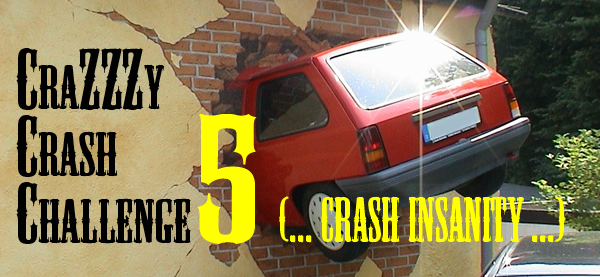
<style>
.page{position:relative;width:600px;height:277px}
.page>*{position:absolute;margin:0}
.t1{font:80px "MesquiteStd";color:#010101;scale:1.25 1}
.t2{font:57.6px "MesquiteStd";color:#010101;scale:1.25 1}
.t3{font:169.2px "MesquiteStd";color:#ffff00;scale:1.72 1}
.t4{font:60px "MesquiteStd";color:#ffff00}
</style>
<div class="page">
<p class="t1" style="left:16px;top:48px;width:149px;height:62px">C<span class="t2">RA</span>ZZZ<span class="t2">Y</span></p>
<p class="t3" style="left:197px;top:113px;width:60px;height:131px">5</p>
<p class="t2" style="left:16px;top:115px;width:102px;height:62px"><span class="t1">C</span>RASH</p>
<p class="t2" style="left:16px;top:182px;width:175px;height:62px"><span class="t1">C</span>HALLENGE</p>
<p class="t4" style="left:279px;top:196px;width:286px;height:47px">(... Crash Insanity ...)</p>
</div>
